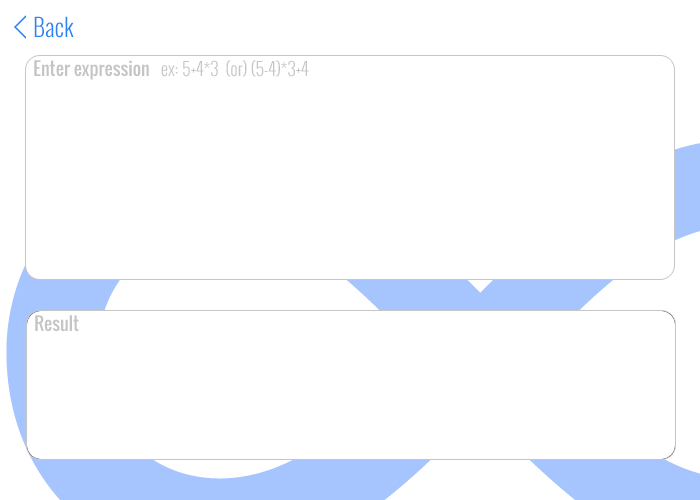
<style>
.page{position:relative;width:700px;height:500px;background:#ffffff}
.page>*{position:absolute;margin:0}
.t1{font:24px "Oswald-Light";color:#2984f2}
.t2{font:18px "Oswald-Light";color:#c5c5c5}
.t3{font:18px "Oswald-Regular";color:#c5c5c5}
</style>
<div class="page">
<p class="t1" style="left:34px;top:16px;width:40px;height:22px">Back</p>
<p class="t2" style="left:34px;top:60px;width:275px;height:20px"><span class="t3">Enter expression   </span>ex: 5+4*3  (or) (5-4)*3+4</p>
<p class="t3" style="left:35px;top:315px;width:44px;height:17px">Result</p>
</div>
